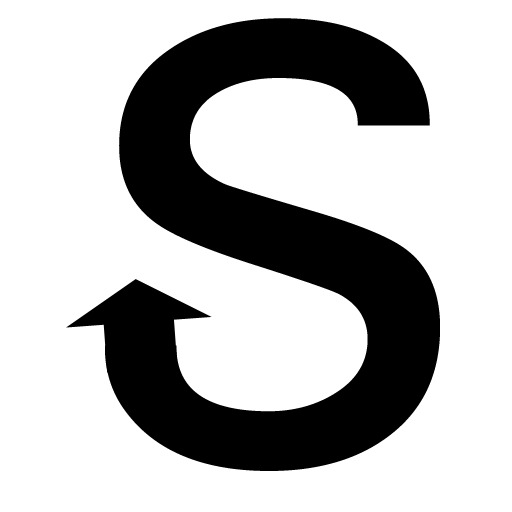
<style>
.page{position:relative;width:512px;height:512px;background:#ffffff}
.page>*{position:absolute;margin:0}
.t1{font:785.8px "GenevaCY";color:#000000}
</style>
<div class="page">
<p class="t1" style="left:105px;top:18px;width:335px;height:453px">s</p>
</div>
